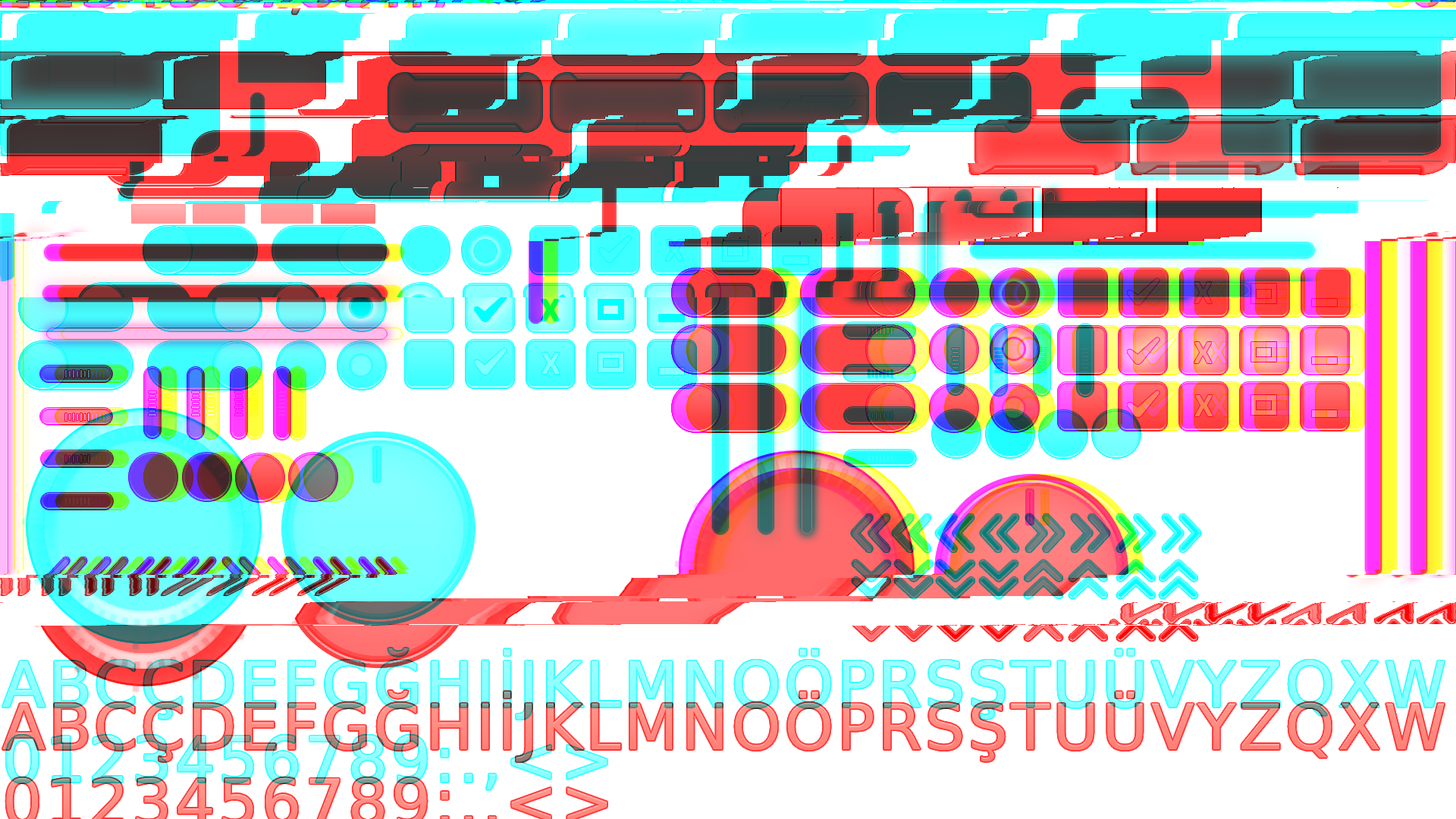
<style>
.page{position:relative;width:1456px;height:819px;background:#ffffff}
.page>*{position:absolute;margin:0}
.t1{font:34.1px "Calibri-Bold";color:#00ff3c}
.t2{font:62.9px "Ash";letter-spacing:0.05em}
</style>
<div class="page">
<p class="t1" style="left:541px;top:297px;width:18px;height:21px">X</p>
<p class="t2" style="left:2px;top:645px;width:1443px;height:72px">ABCÇDEFGĞHIİJKLMNOÖPRSŞTUÜVYZQXW</p>
<p class="t2" style="left:2px;top:645px;width:1443px;height:72px">ABCÇDEFGĞHIİJKLMNOÖPRSŞTUÜVYZQXW</p>
<p class="t2" style="left:6px;top:733px;width:601px;height:54px">0123456789:.,&lt;&gt;</p>
<p class="t2" style="left:6px;top:733px;width:601px;height:54px">0123456789:.,&lt;&gt;</p>
</div>
